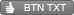
<style>
.page{position:relative;width:74px;height:15px}
.page>*{position:absolute;margin:0}
.t1{font:10px "ArialMT";letter-spacing:0.01em;color:#ffffff}
</style>
<div class="page">
<p class="t1" style="left:24px;top:4px;width:42px;height:7px">BTN TXT</p>
</div>
